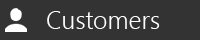
<style>
.page{position:relative;width:200px;height:40px;background:#333333}
.page>*{position:absolute;margin:0}
.t1{font:25px "SegoeUI-Semilight";color:#ffffff}
</style>
<div class="page">
<p class="t1" style="left:47px;top:11px;width:113px;height:18px">Customers</p>
</div>
